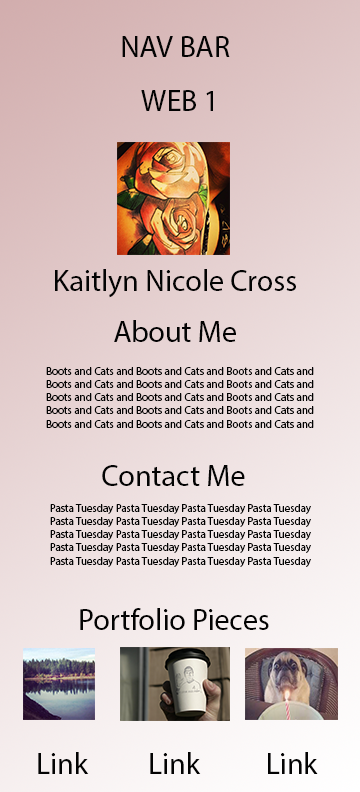
<style>
.page{position:relative;width:360px;height:792px}
.page>*{position:absolute;margin:0}
.t1{font:30px "MyriadPro-Regular";color:#030303}
.t2{font:11px "MyriadPro-Regular";color:#030303}
</style>
<div class="page">
<p class="t1" style="left:122px;top:36px;width:108px;height:21px">NAV BAR</p>
<p class="t1" style="left:141px;top:90px;width:72px;height:21px">WEB 1</p>
<p class="t1" style="left:55px;top:269px;width:241px;height:29px">Kaitlyn Nicole Cross</p>
<p class="t1" style="left:114px;top:320px;width:122px;height:22px">About Me</p>
<p class="t2" style="left:46px;top:367px;width:268px;height:61px;text-align:center">Boots and Cats and Boots and Cats and Boots and Cats and Boots and Cats and Boots and Cats and Boots and Cats and Boots and Cats and Boots and Cats and Boots and Cats and Boots and Cats and Boots and Cats and Boots and Cats and Boots and Cats and Boots and Cats and Boots and Cats and</p>
<p class="t1" style="left:102px;top:465px;width:143px;height:21px">Contact Me</p>
<p class="t2" style="left:50px;top:504px;width:261px;height:63px;text-align:center">Pasta Tuesday Pasta Tuesday Pasta Tuesday Pasta Tuesday Pasta Tuesday Pasta Tuesday Pasta Tuesday Pasta Tuesday Pasta Tuesday Pasta Tuesday Pasta Tuesday Pasta Tuesday Pasta Tuesday Pasta Tuesday Pasta Tuesday Pasta Tuesday Pasta Tuesday Pasta Tuesday Pasta Tuesday Pasta Tuesday</p>
<p class="t1" style="left:80px;top:608px;width:189px;height:22px">Portfolio Pieces</p>
<p class="t1" style="left:38px;top:752px;width:51px;height:22px">Link</p>
<p class="t1" style="left:150px;top:752px;width:51px;height:22px">Link</p>
<p class="t1" style="left:268px;top:752px;width:50px;height:22px">Link</p>
</div>
